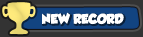
<style>
.page{position:relative;width:143px;height:37px;background:#333333}
.page>*{position:absolute;margin:0}
.t1{font:12px "GROBOLD";color:#ffffff;text-transform:uppercase}
</style>
<div class="page">
<p class="t1" style="left:42px;top:12px;width:82px;height:13px">New Record</p>
</div>
